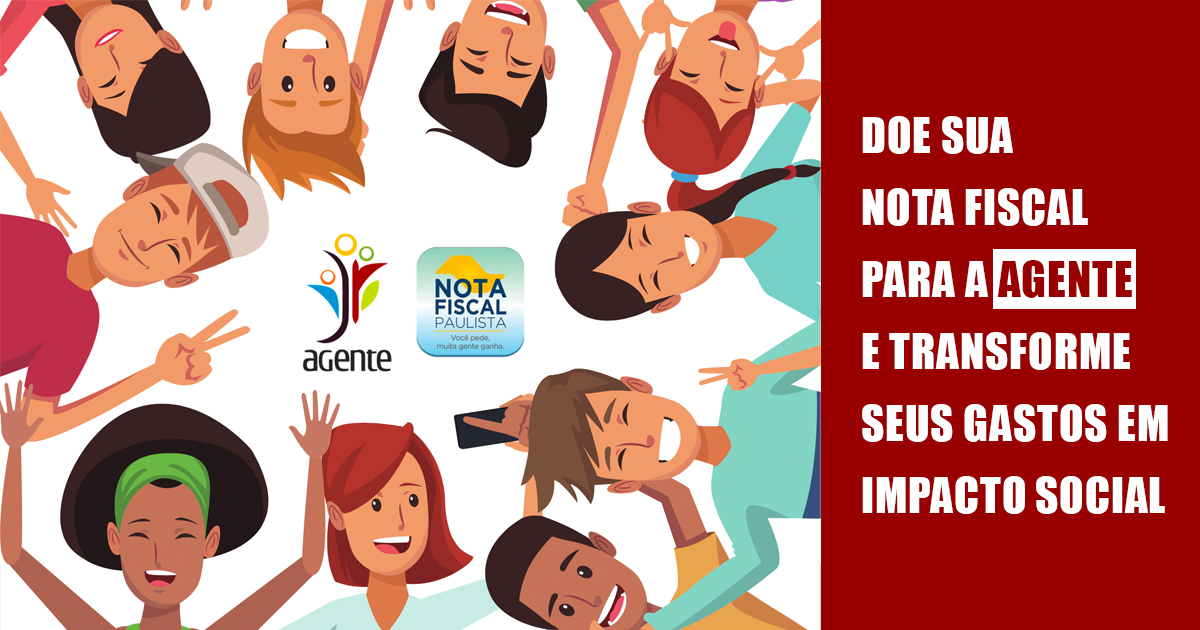
<style>
.page{position:relative;width:1200px;height:630px;background:#ffffff}
.page>*{position:absolute;margin:0}
.t1{font:44.6px/72px "Impact";letter-spacing:0.025em;color:#ffffff}
.t2{font:44.6px/72px "Impact";letter-spacing:0.025em;color:#990000}
</style>
<div class="page">
<p class="t1" style="left:862px;top:116px;width:306px;height:398px">DOE SUA <br>NOTA FISCAL <br>PARA A <span class="t2">AGENTE<br></span>E TRANSFORME<br>SEUS GASTOS EM <br>IMPACTO SOCIAL</p>
</div>
